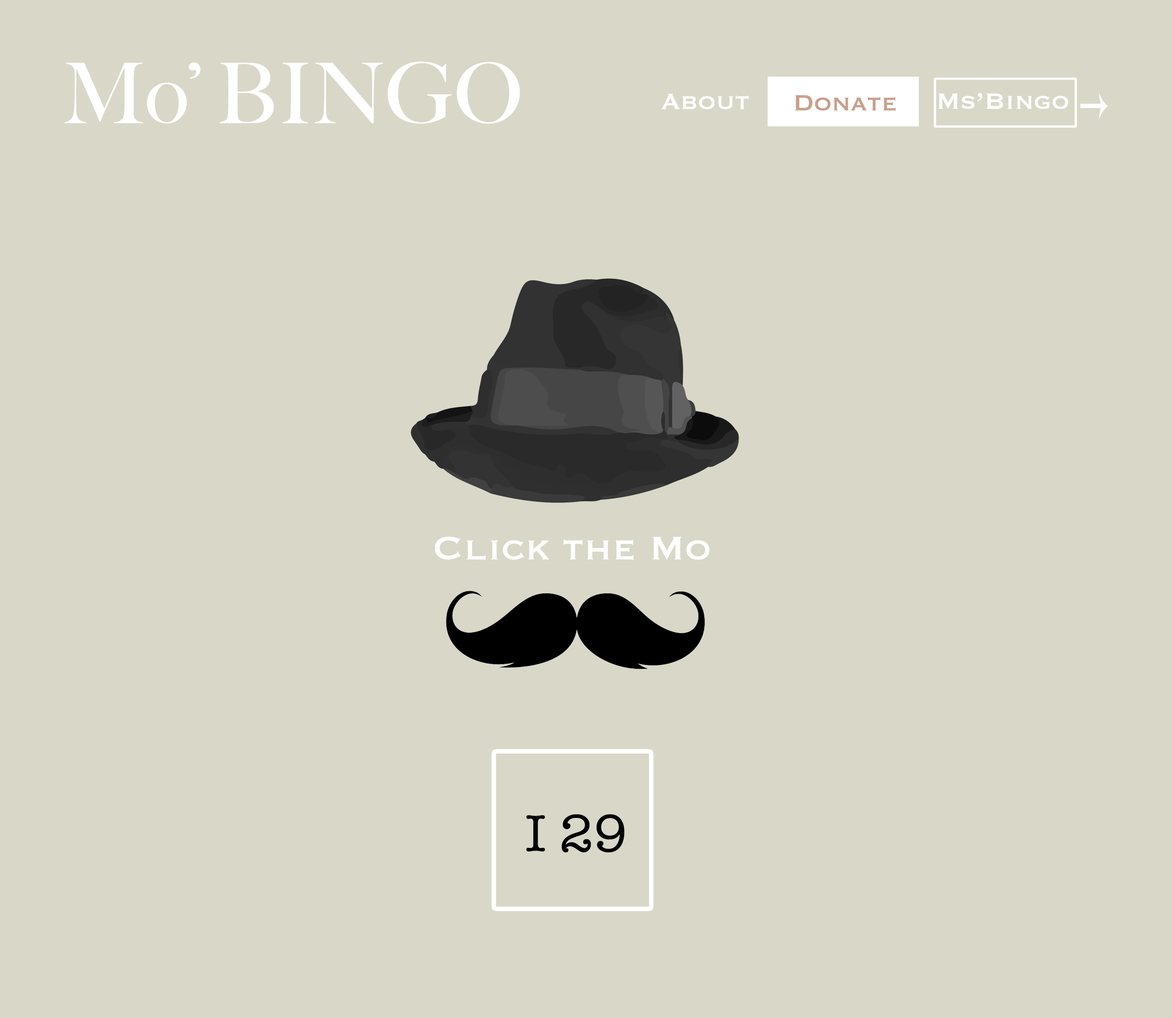
<style>
.page{position:relative;width:1172px;height:1018px;background:#d9d8c8}
.page>*{position:absolute;margin:0}
.t1{font:83.7px "BigCaslon-Medium";color:#ffffff}
.t2{font:28.8px "Copperplate";color:#ffffff}
.t3{font:28.8px "Copperplate";color:#c8a08b}
.t4{font:42.8px "Copperplate";color:#ffffff}
.t5{font:53.5px "AmericanTypewriter";color:#020202}
</style>
<div class="page">
<p class="t1" style="left:64px;top:61px;width:456px;height:63px">Mo’ BINGO</p>
<p class="t2" style="left:662px;top:94px;width:87px;height:15px">About</p>
<p class="t3" style="left:795px;top:95px;width:101px;height:16px">Donate</p>
<p class="t2" style="left:938px;top:93px;width:130px;height:16px">Ms’Bingo</p>
<p class="t4" style="left:435px;top:536px;width:274px;height:24px">Click the Mo</p>
<p class="t5" style="left:526px;top:814px;width:98px;height:38px">I 29</p>
</div>
